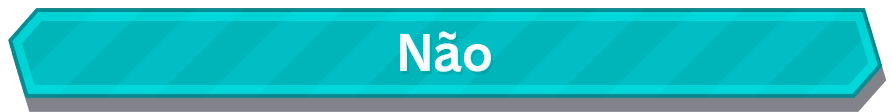
<style>
.page{position:relative;width:891px;height:112px;background:#00bec4}
.page>*{position:absolute;margin:0}
.t1{font:48px "RodinPro-B";color:#fffeff}
</style>
<div class="page">
<p class="t1" style="left:400px;top:31px;width:91px;height:41px">Não</p>
</div>
